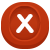
<style>
.page{position:relative;width:50px;height:50px;background:#ffffff}
.page>*{position:absolute;margin:0}
.t1{font:25.8px "RotondaC-Bold";letter-spacing:0.04em;color:#ffffff;text-transform:uppercase;scale:1.12 1}
</style>
<div class="page">
<p class="t1" style="left:16px;top:14px;width:18px;height:19px">х</p>
</div>
